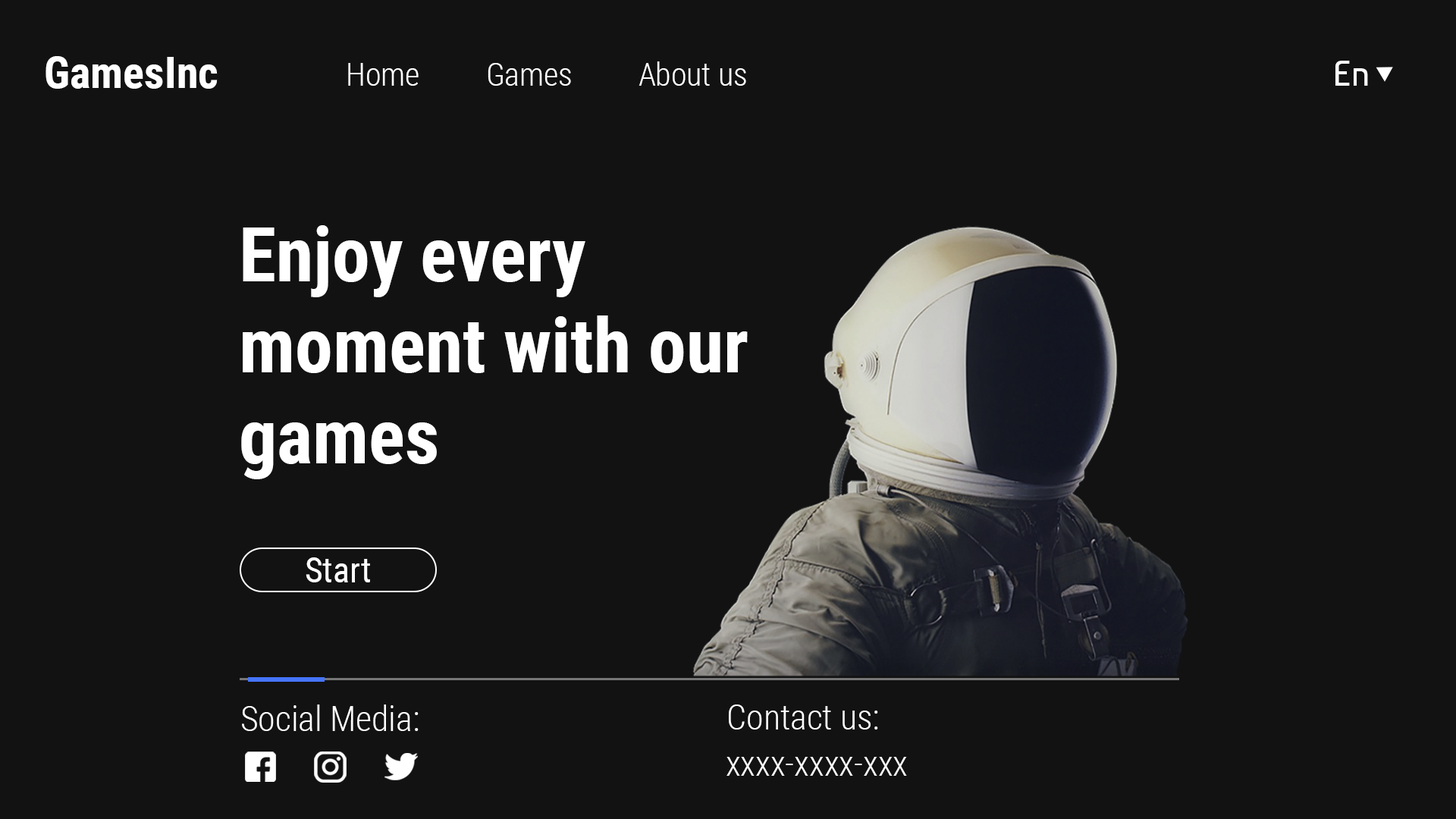
<style>
.page{position:relative;width:1456px;height:819px;background:#121212}
.page>*{position:absolute;margin:0}
.t1{font:44.2px "RobotoCondensed-Bold";color:#ffffff}
.t2{font:31.6px "RobotoCondensed-Light";color:#ffffff}
.t3{font:34.8px "Baumans-Regular";color:#ffffff}
.t4{font:75.8px "RobotoCondensed-Bold";color:#ffffff}
.t5{font:34.8px "RobotoCondensed-Regular";color:#ffffff}
.t6{font:34.9px "RobotoCondensed-Light";color:#ffffff}
.t7{font:34.8px "RobotoCondensed-Light";color:#ffffff}
</style>
<div class="page">
<p class="t1" style="left:45px;top:56px;width:173px;height:33px">GamesInc</p>
<p class="t2" style="left:348px;top:63px;width:71px;height:23px">Home</p>
<p class="t2" style="left:488px;top:63px;width:83px;height:23px">Games</p>
<p class="t2" style="left:639px;top:61px;width:107px;height:25px">About us</p>
<p class="t3" style="left:1335px;top:61px;width:33px;height:25px">En</p>
<p class="t4" style="left:241px;top:225px;width:507px;height:254px">Enjoy every<br>moment with our<br>games</p>
<p class="t5" style="left:306px;top:557px;width:64px;height:25px">Start</p>
<p class="t6" style="left:242px;top:704px;width:177px;height:27px">Social Media:</p>
<p class="t7" style="left:729px;top:704px;width:149px;height:26px">Contact us:</p>
<p class="t7" style="left:726px;top:757px;width:181px;height:19px">xxxx-xxxx-xxx</p>
</div>
